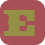
<style>
.page{position:relative;width:45px;height:45px;background:#a75157}
.page>*{position:absolute;margin:0}
.t1{font:50px "Saddlebag-Black";color:#949146}
</style>
<div class="page">
<p class="t1" style="left:3px;top:10px;width:32px;height:26px">E</p>
</div>
